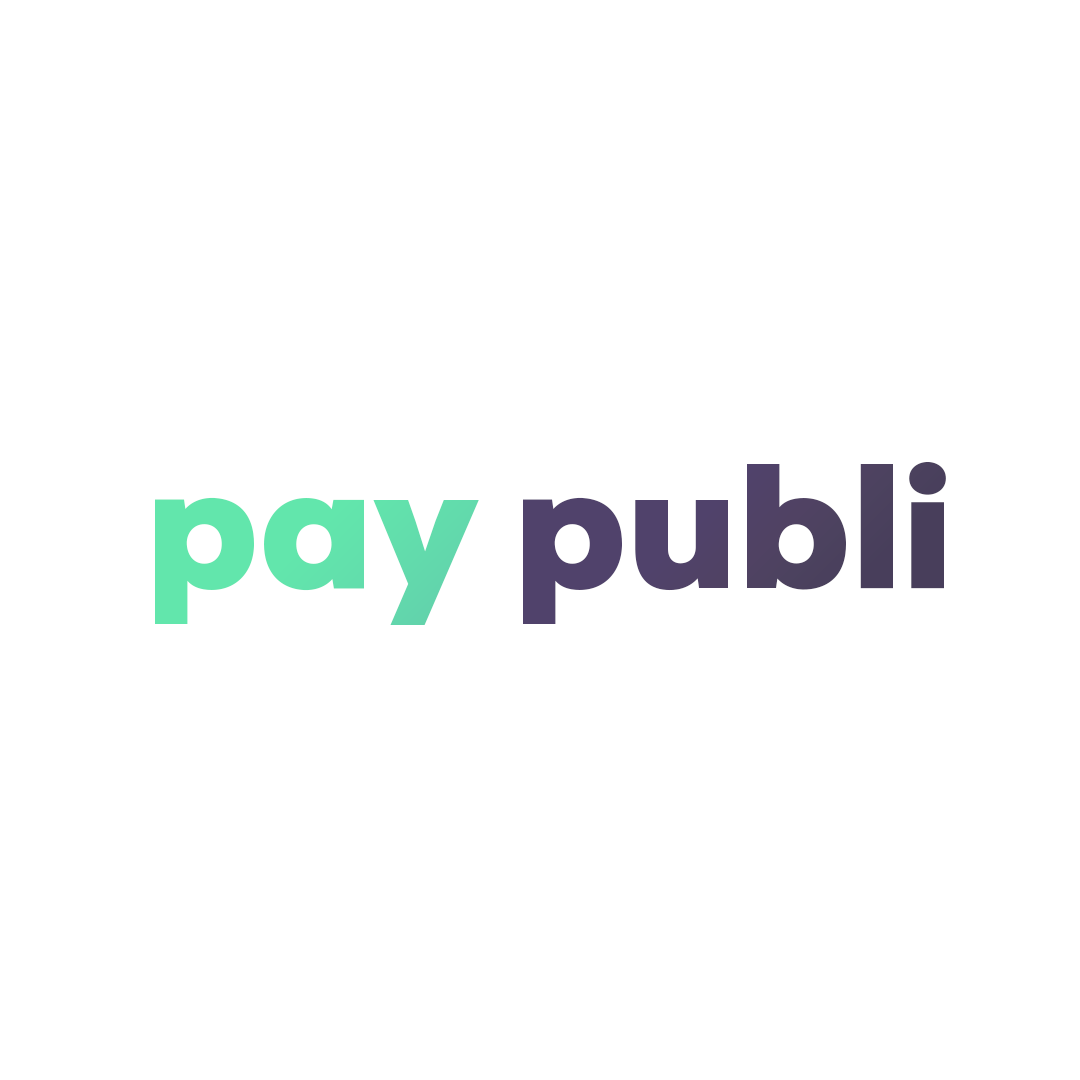
<style>
.page{position:relative;width:1080px;height:1080px;background:#ffffff}
.page>*{position:absolute;margin:0}
.t1{font:172px "NexaBlack";color:#50426b}
.t2{font:172px "NexaBlack";color:#62e6ac}
</style>
<div class="page">
<p class="t1" style="left:155px;top:462px;width:791px;height:163px"><span class="t2">pay </span>publi</p>
</div>
